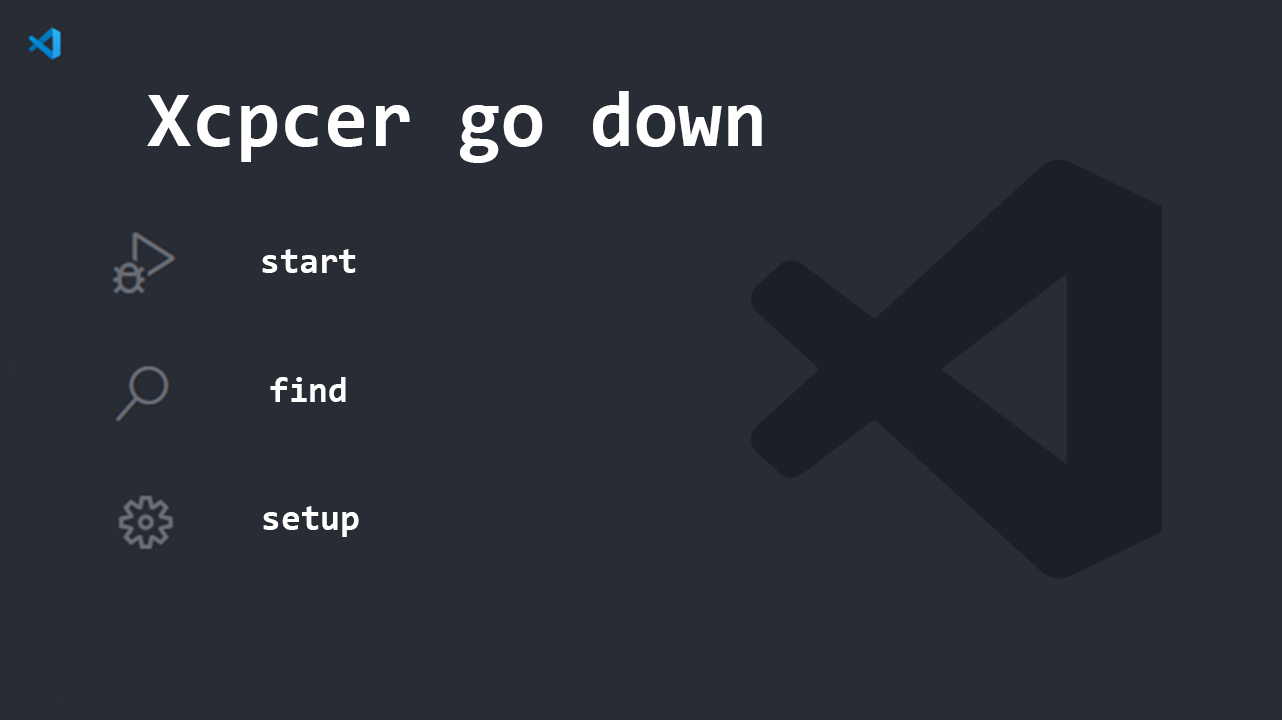
<style>
.page{position:relative;width:1282px;height:720px;background:#282c34}
.page>*{position:absolute;margin:0}
.t1{font:80.5px "Consolas-Bold";color:#ffffff}
.t2{font:35.6px "Consolas-Bold";color:#ffffff}
</style>
<div class="page">
<p class="t1" style="left:147px;top:91px;width:615px;height:72px">Xcpcer go down</p>
<p class="t2" style="left:262px;top:249px;width:94px;height:24px">start</p>
<p class="t2" style="left:270px;top:377px;width:76px;height:25px">find</p>
<p class="t2" style="left:263px;top:506px;width:96px;height:31px">setup</p>
</div>
